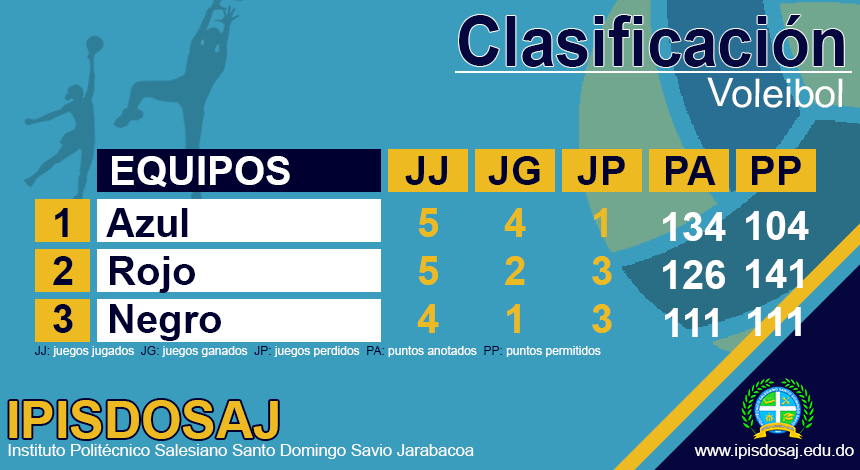
<style>
.page{position:relative;width:860px;height:470px;background:#3b9dbe}
.page>*{position:absolute;margin:0}
.t1{font:69.8px "Arial-BoldMT";color:#06063f;scale:0.91 1}
.t2{font:39.5px "ArialMT";color:#ffffff}
.t3{font:40px "Arial-BoldMT";color:#ffffff}
.t4{font:30px "Arial-BoldMT";color:#3b9dbe}
.t5{font:40px "Arial-BoldMT";color:#000030}
.t6{font:40px "Arial-BoldMT";color:#eeba22}
.t7{font:12px "ArialMT";color:#ffffff}
.t8{font:12px "ArialMT";color:#000030}
.t9{font:51.7px "Arial-BoldMT";color:#eeba22}
.t10{font:16.6px "ArialMT";color:#ffffff}
</style>
<div class="page">
<p class="t1" style="left:459px;top:15px;width:385px;height:52px">Clasificación</p>
<p class="t2" style="left:707px;top:77px;width:136px;height:31px">Voleibol</p>
<p class="t3" style="left:51px;top:156px;width:239px;height:31px"><span class="t4">0     </span>EQUIPOS</p>
<p class="t5" style="left:405px;top:156px;width:42px;height:29px">JJ</p>
<p class="t5" style="left:488px;top:156px;width:52px;height:29px">JG</p>
<p class="t5" style="left:577px;top:156px;width:48px;height:29px">JP</p>
<p class="t5" style="left:666px;top:156px;width:50px;height:29px">PA</p>
<p class="t5" style="left:752px;top:156px;width:49px;height:29px">PP</p>
<p class="t5" style="left:53px;top:208px;width:168px;height:133px">1   Azul<br>2   Rojo<br>3   Negro</p>
<p class="t6" style="left:417px;top:208px;width:22px;height:125px;text-align:center">5<br>5<br>4</p>
<p class="t6" style="left:504px;top:208px;width:22px;height:125px;text-align:center">4<br>2<br>1</p>
<p class="t6" style="left:592px;top:208px;width:20px;height:125px;text-align:center">1<br>3<br>3</p>
<p class="t3" style="left:663px;top:212px;width:63px;height:125px;text-align:center">134<br>126<br>111</p>
<p class="t3" style="left:746px;top:211px;width:63px;height:125px;text-align:center">104<br>141<br>111</p>
<p class="t7" style="left:34px;top:346px;width:567px;height:11px"><span class="t8">JJ: </span>juegos jugados <span class="t8"> JG: </span>juegos ganados  <span class="t8">JP: </span>juegos perdidos  <span class="t8">PA:</span> puntos anotados  <span class="t8">PP: </span>puntos permitidos</p>
<p class="t9" style="left:9px;top:400px;width:269px;height:39px">IPISDOSAJ</p>
<p class="t10" style="left:8px;top:444px;width:846px;height:15px">Instituto Politécnico Salesiano Santo Domingo Savio Jarabacoa                                                www.ipisdosaj.edu.do</p>
</div>
